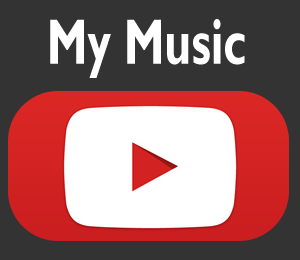
<style>
.page{position:relative;width:300px;height:260px;background:#333333}
.page>*{position:absolute;margin:0}
.t1{font:64.4px "GillSansMT-Bold";color:#ffffff;scale:0.71 1}
</style>
<div class="page">
<p class="t1" style="left:50px;top:19px;width:195px;height:59px">My Music</p>
</div>
